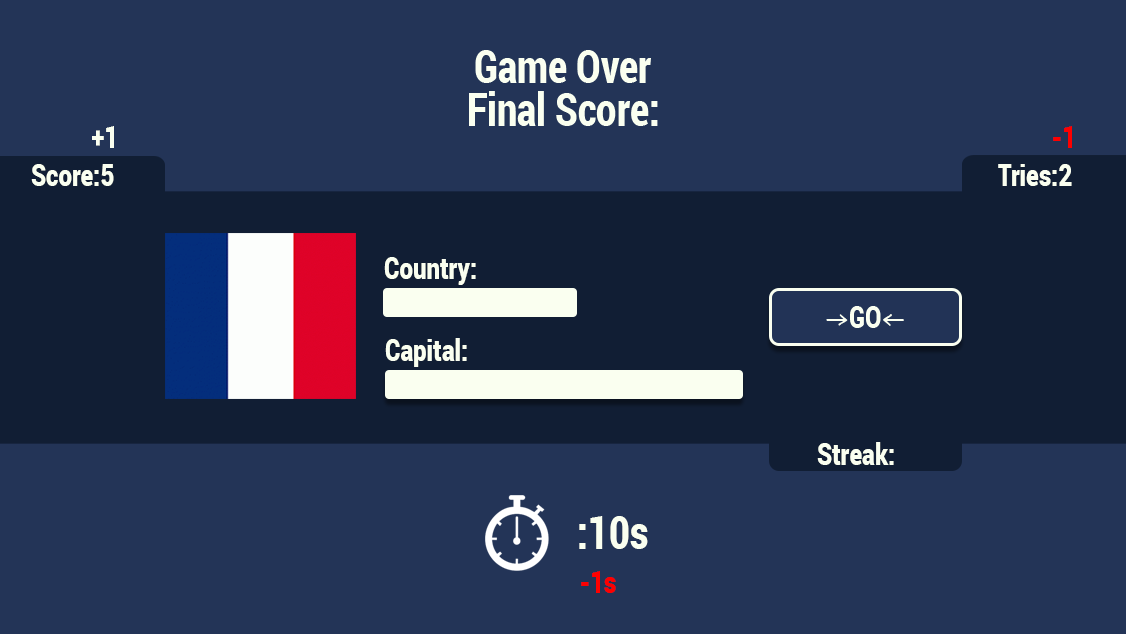
<style>
.page{position:relative;width:1126px;height:634px;background:#233457}
.page>*{position:absolute;margin:0}
.t1{font:30.5px "Roboto-Black";color:#fafff0;scale:0.79 1}
.t2{font:30.5px "Roboto-Black";color:#fe0000;scale:0.79 1}
.t3{font:46px "Roboto-Black";color:#fafff0;scale:0.78 1}
</style>
<div class="page">
<p class="t1" style="left:92px;top:126px;width:22px;height:22px">+1</p>
<p class="t2" style="left:1053px;top:126px;width:19px;height:22px">-1</p>
<p class="t1" style="left:31px;top:164px;width:83px;height:22px">Score:5</p>
<p class="t1" style="left:998px;top:164px;width:74px;height:22px">Tries:2</p>
<p class="t1" style="left:384px;top:257px;width:92px;height:28px">Country:</p>
<p class="t1" style="left:385px;top:338px;width:82px;height:29px">Capital:</p>
<p class="t1" style="left:817px;top:442px;width:77px;height:23px">Streak:</p>
<p class="t3" style="left:579px;top:516px;width:69px;height:33px">:10s</p>
<p class="t2" style="left:581px;top:571px;width:35px;height:22px">-1s</p>
</div>
